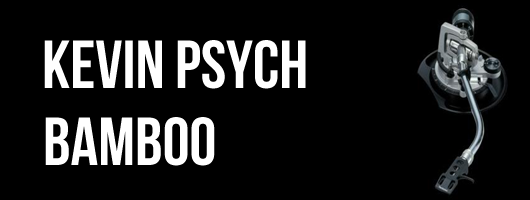
<style>
.page{position:relative;width:530px;height:200px;background:#000000}
.page>*{position:absolute;margin:0}
.t1{font:68px "BebasNeue";color:#ffffff}
</style>
<div class="page">
<p class="t1" style="left:44px;top:40px;width:262px;height:49px">kevin psych</p>
<p class="t1" style="left:45px;top:117px;width:170px;height:49px">Bamboo</p>
</div>
